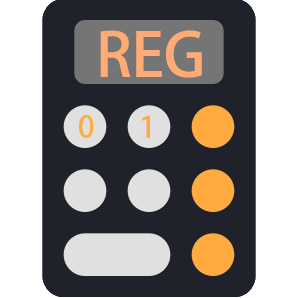
<style>
.page{position:relative;width:298px;height:298px;background:#1f212b}
.page>*{position:absolute;margin:0}
.t1{font:60px "AdobeHeitiStd-Regular";color:#ffab75}
.t2{font:30px "AdobeHeitiStd-Regular";color:#ffab40}
</style>
<div class="page">
<p class="t1" style="left:100px;top:30px;width:102px;height:48px">REG</p>
<p class="t2" style="left:79px;top:115px;width:15px;height:23px">0</p>
<p class="t2" style="left:142px;top:115px;width:8px;height:23px">1</p>
</div>
